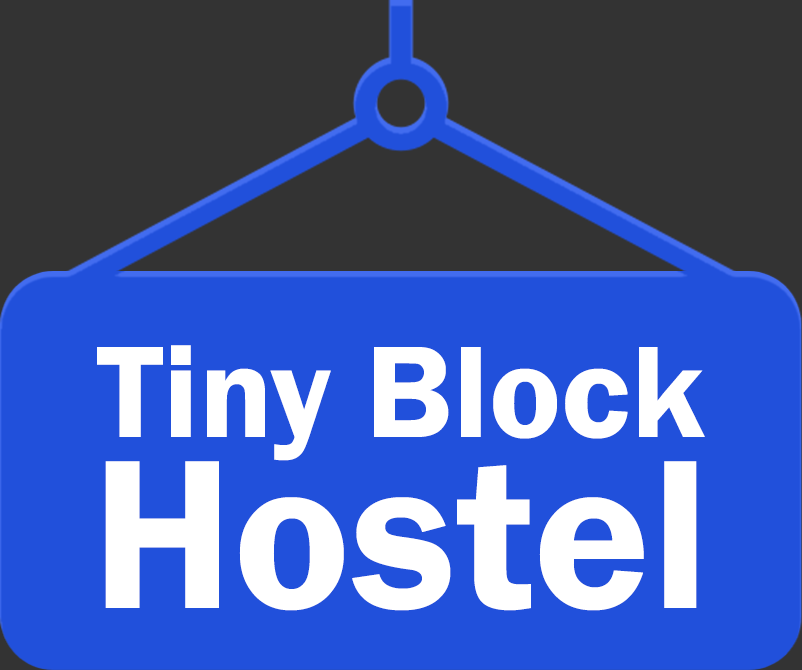
<style>
.page{position:relative;width:802px;height:670px;background:#2150db}
.page>*{position:absolute;margin:0}
.t1{font:135px "FranklinGothic-Demi";color:#ffffff}
.t2{font:220px "FranklinGothic-Demi";color:#ffffff}
</style>
<div class="page">
<p class="t1" style="left:97px;top:345px;width:608px;height:116px">Tiny Block</p>
<p class="t2" style="left:105px;top:461px;width:592px;height:150px">Hostel</p>
</div>
